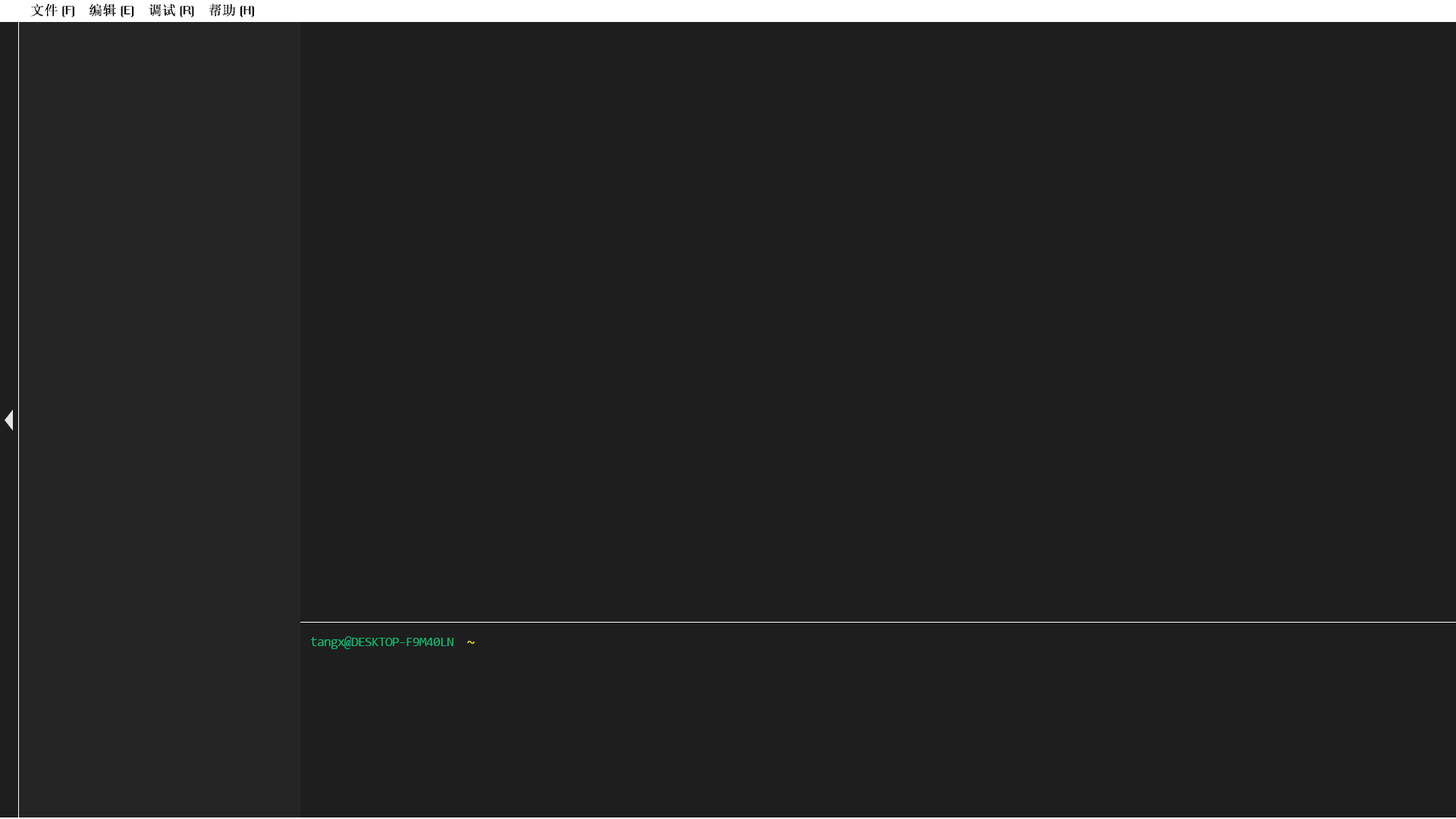
<style>
.page{position:relative;width:1456px;height:819px;background:#1e1e1e}
.page>*{position:absolute;margin:0}
.t1{font:13.6px "System";color:#000000}
</style>
<div class="page">
<p class="t1" style="left:30px;top:4px;width:224px;height:13px">文件(F)    编辑(E)    调试(R)    帮助(H)</p>
</div>
